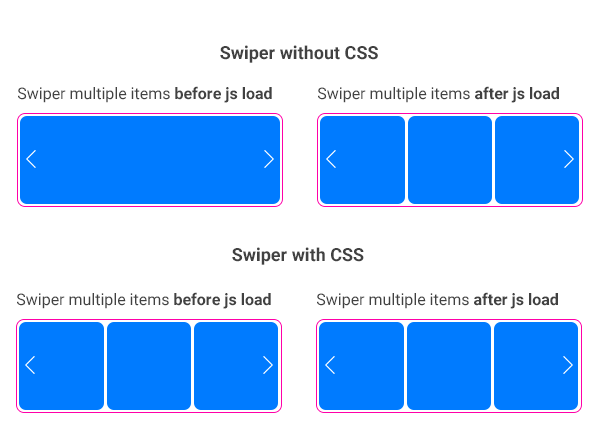
<style>
.page{position:relative;width:600px;height:434px;background:#ffffff}
.page>*{position:absolute;margin:0}
.t1{font:18px "Roboto-Bold";color:#414141}
.t2{font:16px "Roboto-Regular";color:#414141}
.t3{font:16px "Roboto-Bold";color:#414141}
</style>
<div class="page">
<p class="t1" style="left:220px;top:45px;width:158px;height:18px">Swiper without CSS</p>
<p class="t2" style="left:18px;top:86px;width:254px;height:17px">Swiper multiple items <span class="t3">before js load</span></p>
<p class="t2" style="left:318px;top:86px;width:241px;height:17px">Swiper multiple items <span class="t3">after js load</span></p>
<p class="t1" style="left:232px;top:247px;width:132px;height:18px">Swiper with CSS</p>
<p class="t2" style="left:17px;top:292px;width:254px;height:17px">Swiper multiple items <span class="t3">before js load</span></p>
<p class="t2" style="left:317px;top:292px;width:241px;height:17px">Swiper multiple items <span class="t3">after js load</span></p>
</div>
